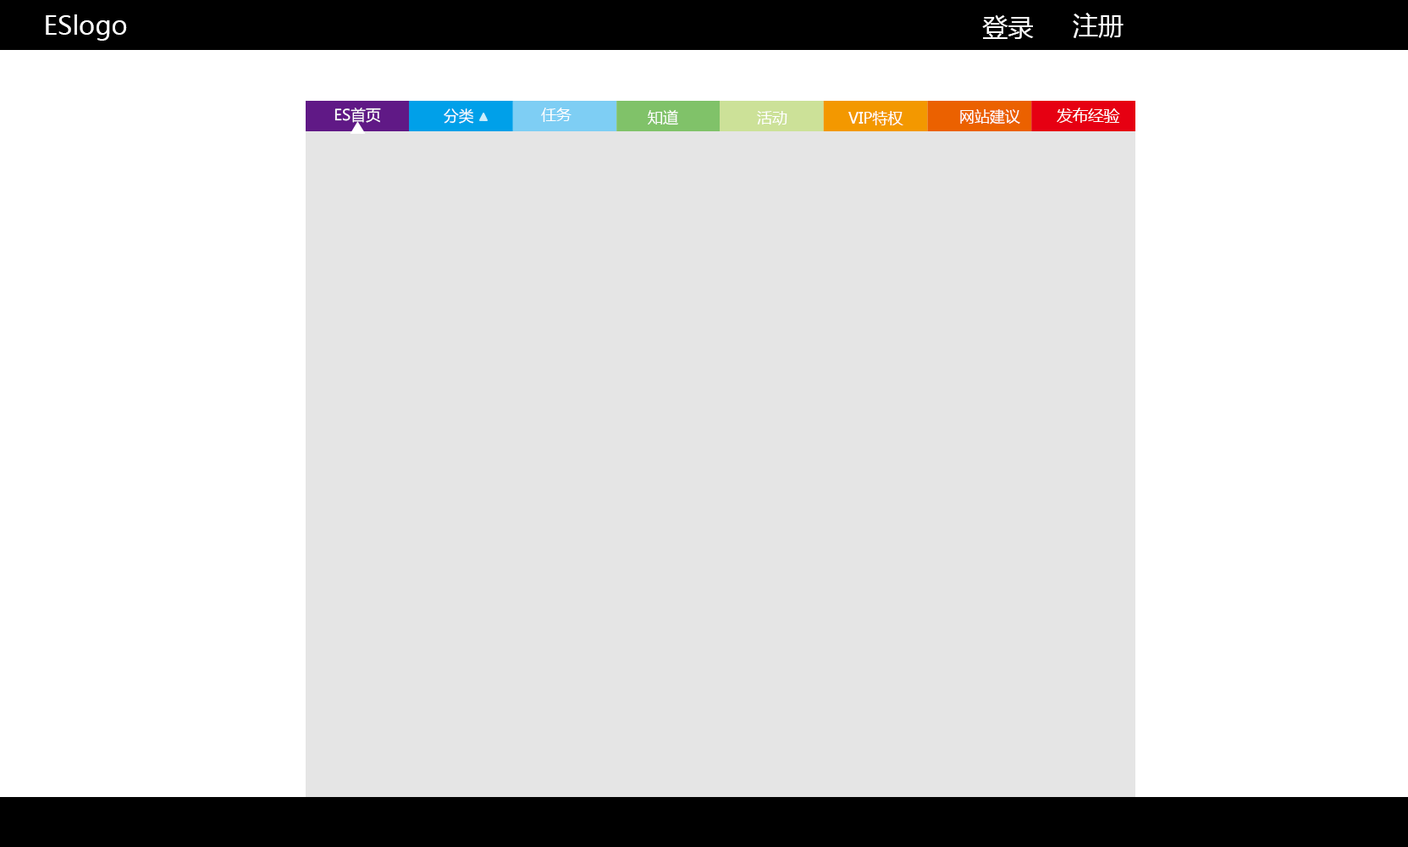
<style>
.page{position:relative;width:1408px;height:847px;background:#e5e5e5}
.page>*{position:absolute;margin:0}
.t1{font:25.4px "MicrosoftYaHei";color:#ffffff}
.t2{font:15px "MicrosoftYaHei";color:#ffffff}
.t3{font:15.2px "MicrosoftYaHei";color:#ffffff}
</style>
<div class="page">
<p class="t1" style="left:46px;top:14px;width:81px;height:27px">ESlogo</p>
<p class="t1" style="left:982px;top:15px;width:52px;height:24px">登录</p>
<p class="t1" style="left:1073px;top:13px;width:51px;height:25px">注册</p>
<p class="t2" style="left:334px;top:108px;width:47px;height:15px">ES首页</p>
<p class="t2" style="left:444px;top:108px;width:30px;height:16px">分类</p>
<p class="t3" style="left:541px;top:108px;width:31px;height:14px">任务</p>
<p class="t3" style="left:648px;top:109px;width:30px;height:16px">知道</p>
<p class="t3" style="left:757px;top:111px;width:31px;height:14px">活动</p>
<p class="t3" style="left:848px;top:111px;width:56px;height:14px">VIP特权</p>
<p class="t3" style="left:960px;top:109px;width:60px;height:15px">网站建议</p>
<p class="t3" style="left:1057px;top:108px;width:63px;height:15px">发布经验</p>
</div>
